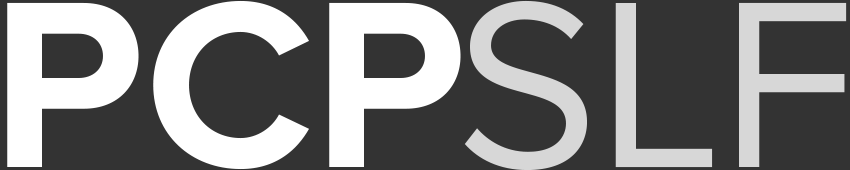
<style>
.page{position:relative;width:850px;height:170px;background:#333333}
.page>*{position:absolute;margin:0}
.t1{font:245.4px "ProximaNova-Bold";color:#ffffff}
.t2{font:245.4px "ProximaNova-Regular";color:#d7d7d7}
</style>
<div class="page">
<p class="t1" style="left:7px;top:0px;width:454px;height:170px">PCP</p>
<p class="t2" style="left:464px;top:0px;width:383px;height:171px">SLF</p>
</div>
